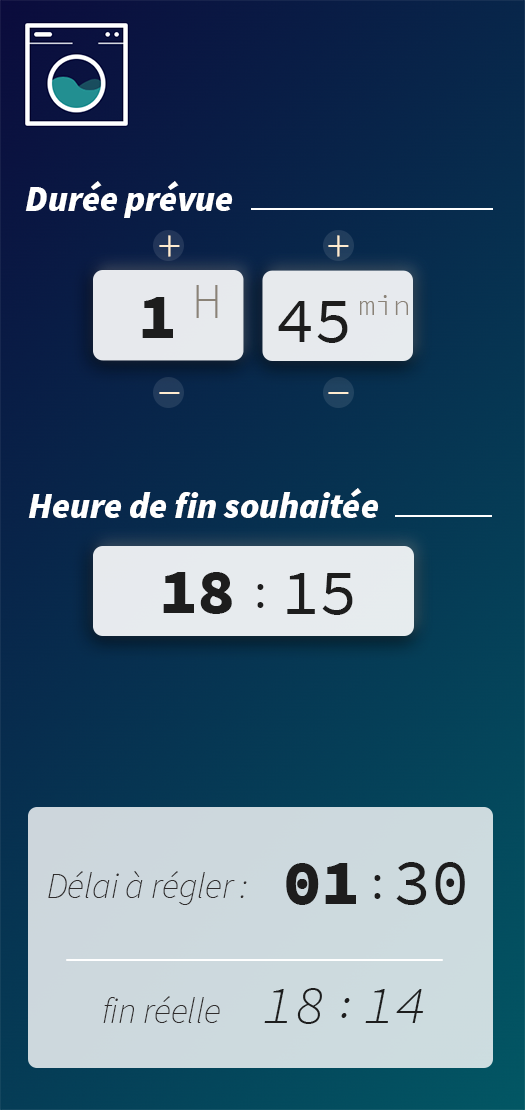
<style>
.page{position:relative;width:525px;height:1110px}
.page>*{position:absolute;margin:0}
.t1{font:36px "SourceSansPro-BlackIt";color:#ffffff}
.t2{font:48px "SourceCodePro-Light";color:#ffecd0}
.t3{font:50.4px "SourceCodePro-Light";color:#8a8277}
.t4{font:64.4px "SourceCodePro-Black";color:#1d1d1d}
.t5{font:64.4px "SourceCodePro-Regular";color:#1d1d1d}
.t6{font:29px "SourceCodePro-Light";color:#8a8277}
.t7{font:48px "SourceCodePro-Light";color:#1d1d1d}
.t8{font:36px "SourceSansPro-ExtraLightIt";color:#302d2d}
.t9{font:53.1px "SourceCodePro-LightIt";color:#1d1d1d}
.t10{font:39.6px "SourceCodePro-LightIt";color:#1d1d1d}
</style>
<div class="page">
<p class="t1" style="left:25px;top:181px;width:208px;height:37px">Durée prévue</p>
<p class="t2" style="left:159px;top:235px;width:21px;height:22px">+</p>
<p class="t2" style="left:328px;top:235px;width:21px;height:22px">+</p>
<p class="t3" style="left:196px;top:285px;width:22px;height:33px">H</p>
<p class="t4" style="left:142px;top:297px;width:31px;height:41px">1</p>
<p class="t5" style="left:278px;top:301px;width:70px;height:42px">45</p>
<p class="t6" style="left:360px;top:295px;width:48px;height:20px">min</p>
<p class="t2" style="left:159px;top:392px;width:21px;height:2px">-</p>
<p class="t2" style="left:328px;top:392px;width:21px;height:2px">-</p>
<p class="t1" style="left:28px;top:488px;width:351px;height:30px">Heure de fin souhaitée</p>
<p class="t4" style="left:163px;top:572px;width:69px;height:42px">18</p>
<p class="t5" style="left:287px;top:573px;width:66px;height:42px">15</p>
<p class="t7" style="left:257px;top:584px;width:7px;height:24px">:</p>
<p class="t4" style="left:286px;top:863px;width:70px;height:42px">01</p>
<p class="t5" style="left:396px;top:862px;width:69px;height:43px">30</p>
<p class="t8" style="left:48px;top:871px;width:199px;height:34px">Délai à régler :</p>
<p class="t7" style="left:374px;top:875px;width:7px;height:24px">:</p>
<p class="t9" style="left:264px;top:988px;width:58px;height:36px">18</p>
<p class="t9" style="left:365px;top:989px;width:59px;height:34px">14</p>
<p class="t8" style="left:103px;top:996px;width:117px;height:27px">fin réelle</p>
<p class="t10" style="left:341px;top:998px;width:9px;height:20px">:</p>
</div>
